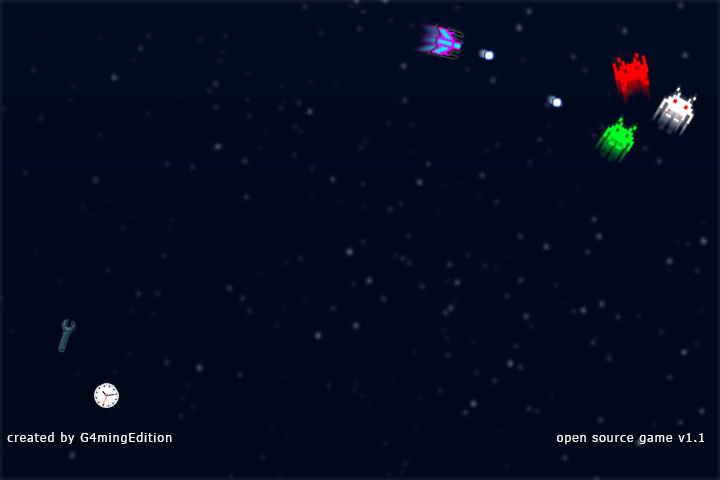
<style>
.page{position:relative;width:720px;height:480px;background:#01081b}
.page>*{position:absolute;margin:0}
.t1{font:11.7px "Tahoma";letter-spacing:0.1em;color:#f6f6f6}
.t2{font:12px "Tahoma";letter-spacing:0.1em;color:#f6f6f6}
</style>
<div class="page">
<p class="t1" style="left:7px;top:432px;width:165px;height:12px">created by G4mingEdition</p>
<p class="t2" style="left:557px;top:433px;width:147px;height:11px">open source game v1.1</p>
</div>
